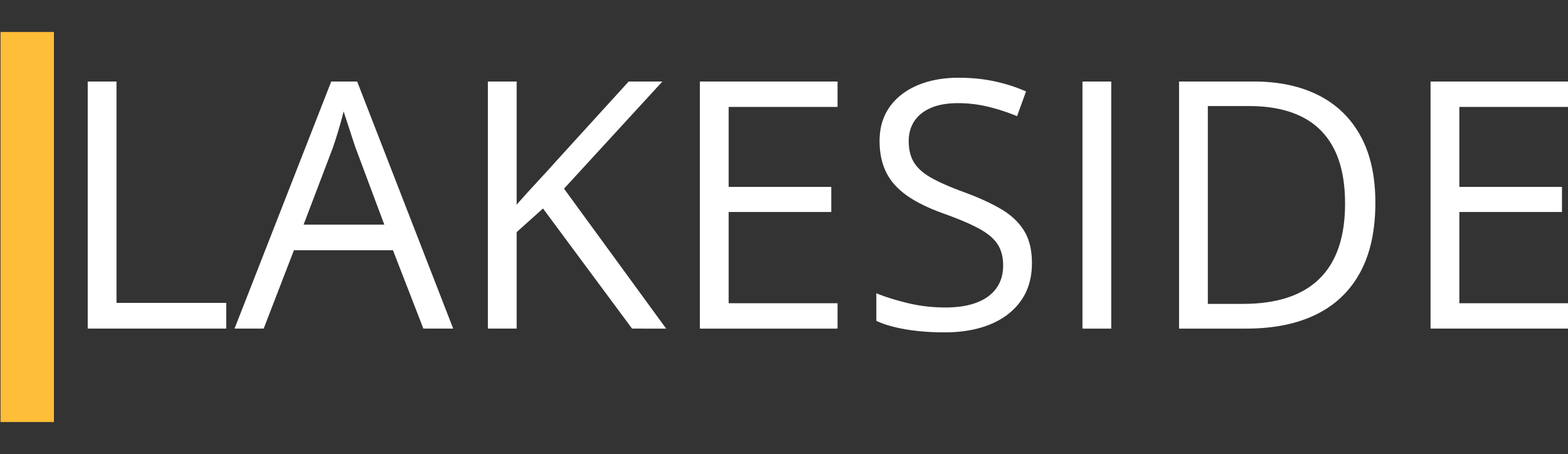
<style>
.page{position:relative;width:1568px;height:454px;background:#333333}
.page>*{position:absolute;margin:0}
.t1{font:346.4px "OpenSans-Regular";color:#ffffff}
</style>
<div class="page">
<p class="t1" style="left:87px;top:78px;width:1482px;height:254px">LAKESIDE</p>
</div>
